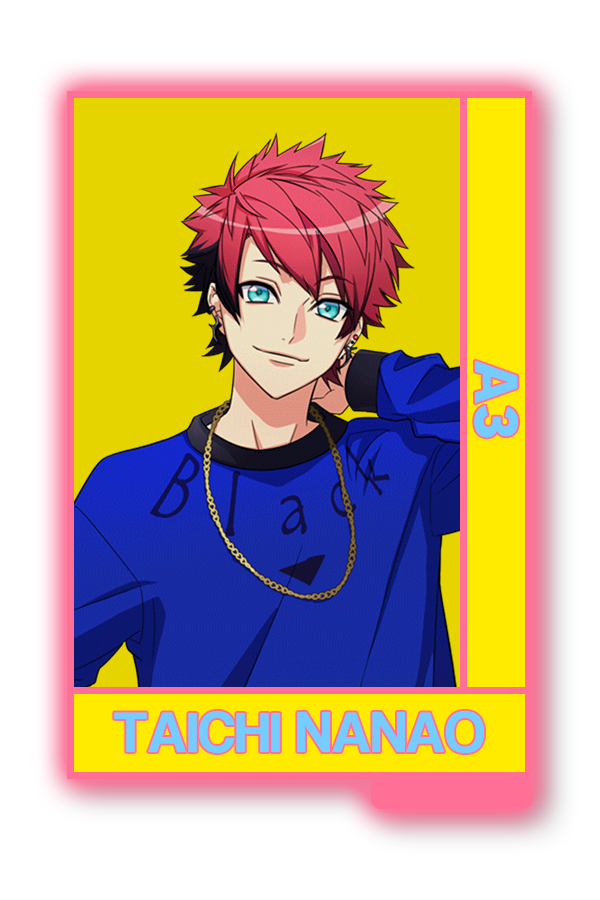
<style>
.page{position:relative;width:600px;height:900px;background:#ffffff}
.page>*{position:absolute;margin:0}
.t1{font:60.5px "MADETOMMY-Bold";color:#74ccff}
.t2{font:60.4px "CoolveticaRg-Regular";color:#74ccff}
</style>
<div class="page">
<p class="t1" style="left:474px;top:360px;width:44px;height:78px;rotate:90deg">A3</p>
<p class="t2" style="left:114px;top:711px;width:371px;height:42px">TAICHI NANAO</p>
</div>
